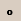
<style>
.page{position:relative;width:21px;height:21px;background:#d9cdc1}
.page>*{position:absolute;margin:0}
.t1{font:9px "Tahoma-Bold";color:#000000}
</style>
<div class="page">
<p class="t1" style="left:7px;top:10px;width:6px;height:5px">o</p>
</div>
